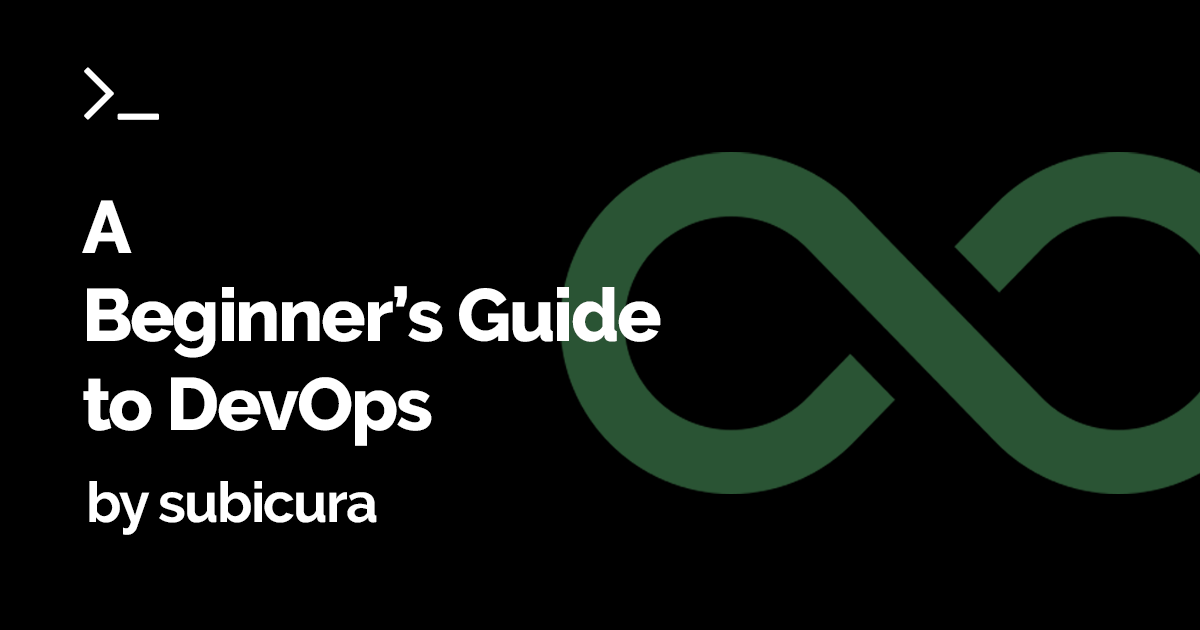
<style>
.page{position:relative;width:1200px;height:630px;background:#000000}
.page>*{position:absolute;margin:0}
.t1{font:74px "Raleway-ExtraBold";letter-spacing:-0.03em;color:#ffffff}
.t2{font:56px "Raleway-Bold";letter-spacing:-0.03em;color:#ffffff}
</style>
<div class="page">
<p class="t1" style="left:82px;top:200px;width:579px;height:246px">A<br>Beginner’s Guide<br>to DevOps</p>
<p class="t2" style="left:89px;top:481px;width:288px;height:54px">by subicura</p>
</div>
